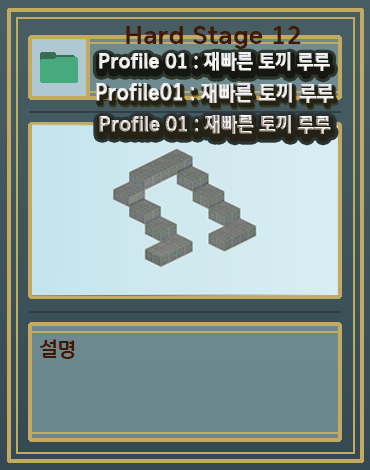
<style>
.page{position:relative;width:370px;height:470px}
.page>*{position:absolute;margin:0}
.t1{font:24px "Gwangyang-Sunshine-Bold";color:#431800}
.t2{font:19.8px "Gwangyang-Sunshine-Bold";letter-spacing:-0.03em;color:#ffffff;font-weight:bold;scale:0.91 1}
.t3{font:20.9px "Gwangyang-Sunshine-Bold";letter-spacing:-0.03em;color:#eaebed;font-weight:bold;scale:0.91 1}
.t4{font:19.8px "Gwangyang-Sunshine-Bold";letter-spacing:-0.03em;font-weight:bold;scale:0.91 1}
.t5{font:20px "Gwangyang-Sunshine-Bold";color:#431800}
</style>
<div class="page">
<p class="t1" style="left:126px;top:26px;width:175px;height:23px">Hard Stage 12</p>
<p class="t2" style="left:99px;top:52px;width:231px;height:19px">Profile 01 : 재빠른 토끼 루루</p>
<p class="t3" style="left:96px;top:83px;width:238px;height:20px">Profile01 : 재빠른 토끼 루루</p>
<p class="t4" style="left:99px;top:115px;width:232px;height:19px">Profile 01 : 재빠른 토끼 루루</p>
<p class="t5" style="left:40px;top:339px;width:35px;height:20px">설명</p>
</div>
